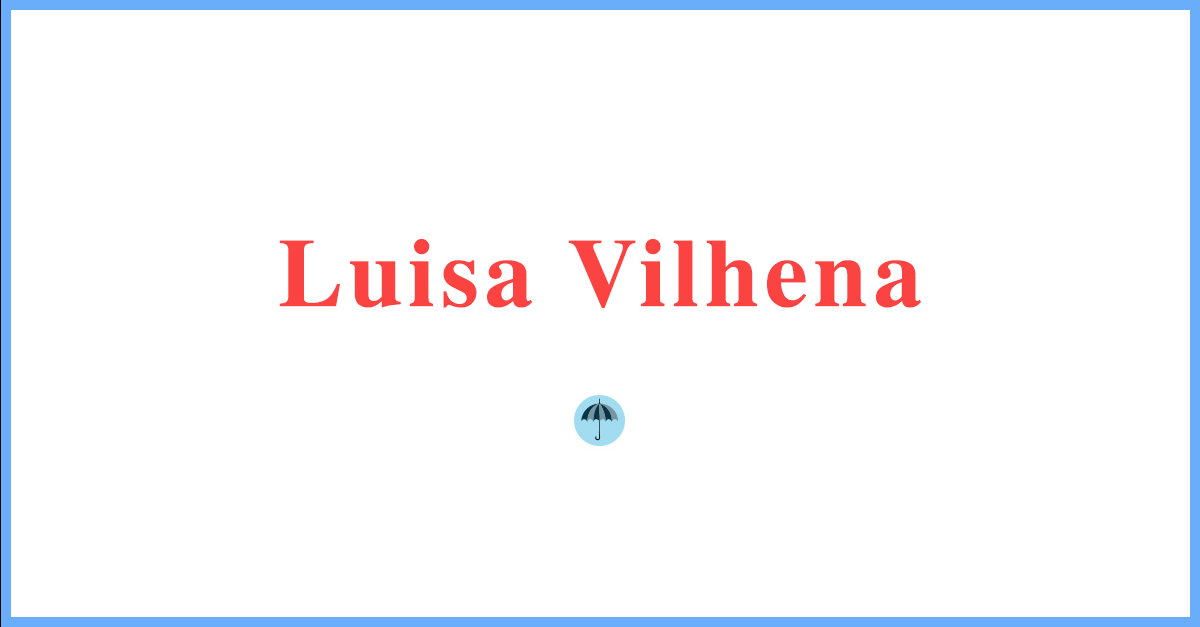
<style>
.page{position:relative;width:1200px;height:627px;background:#ffffff}
.page>*{position:absolute;margin:0}
.t1{font:97px "Times-Bold";letter-spacing:0.06em;color:#fb4341}
</style>
<div class="page">
<p class="t1" style="left:279px;top:239px;width:642px;height:69px">Luisa Vilhena</p>
</div>
